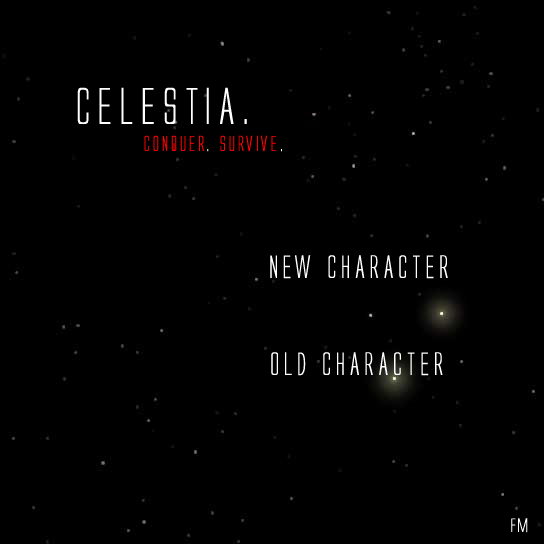
<style>
.page{position:relative;width:544px;height:544px;background:#000000}
.page>*{position:absolute;margin:0}
.t1{font:48px "AlienLeague";color:#ffffff}
.t2{font:20px "AlienLeague";color:#ff0000}
.t3{font:20px "AlienLeague";color:#ffffff}
.t4{font:30px "AlienLeague";color:#ffffff}
.t5{font:18px "AlienLeague";color:#ffffff}
</style>
<div class="page">
<p class="t1" style="left:77px;top:87px;width:170px;height:37px">CELESTiA.</p>
<p class="t2" style="left:144px;top:135px;width:138px;height:17px">Conquer<span class="t3">. </span>Survive<span class="t3">.</span></p>
<p class="t4" style="left:270px;top:255px;width:178px;height:24px">New ChArActer</p>
<p class="t4" style="left:271px;top:352px;width:172px;height:24px">Old CHARACTER</p>
<p class="t5" style="left:511px;top:518px;width:17px;height:15px">FM</p>
</div>
